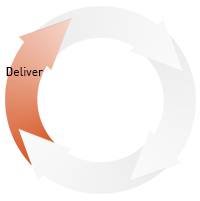
<style>
.page{position:relative;width:200px;height:201px;background:#ffffff}
.page>*{position:absolute;margin:0}
.t1{font:12px "DINAlternate-Regular";color:#000000}
</style>
<div class="page">
<p class="t1" style="left:6px;top:67px;width:38px;height:9px">Deliver</p>
</div>
